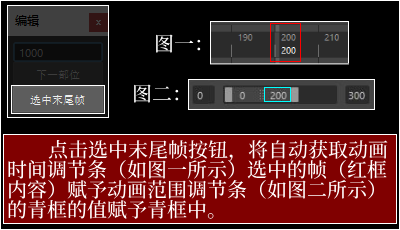
<style>
.page{position:relative;width:400px;height:230px;background:#000000}
.page>*{position:absolute;margin:0}
.t1{font:20px "SourceHanSerifSC-Medium";color:#ffffff}
.t2{font:20px/20px "SourceHanSerifSC-Medium";color:#ffffff}
</style>
<div class="page">
<p class="t1" style="left:156px;top:34px;width:45px;height:19px">图一：</p>
<p class="t1" style="left:134px;top:84px;width:45px;height:19px">图二：</p>
<p class="t2" style="left:8px;top:140px;width:380px;height:79px">点击选中末尾帧按钮，将自动获取动画<br>时间调节条（如图一所示）选中的帧（红框<br>内容）赋予动画范围调节条（如图二所示）<br>的青框的值赋予青框中。</p>
</div>
